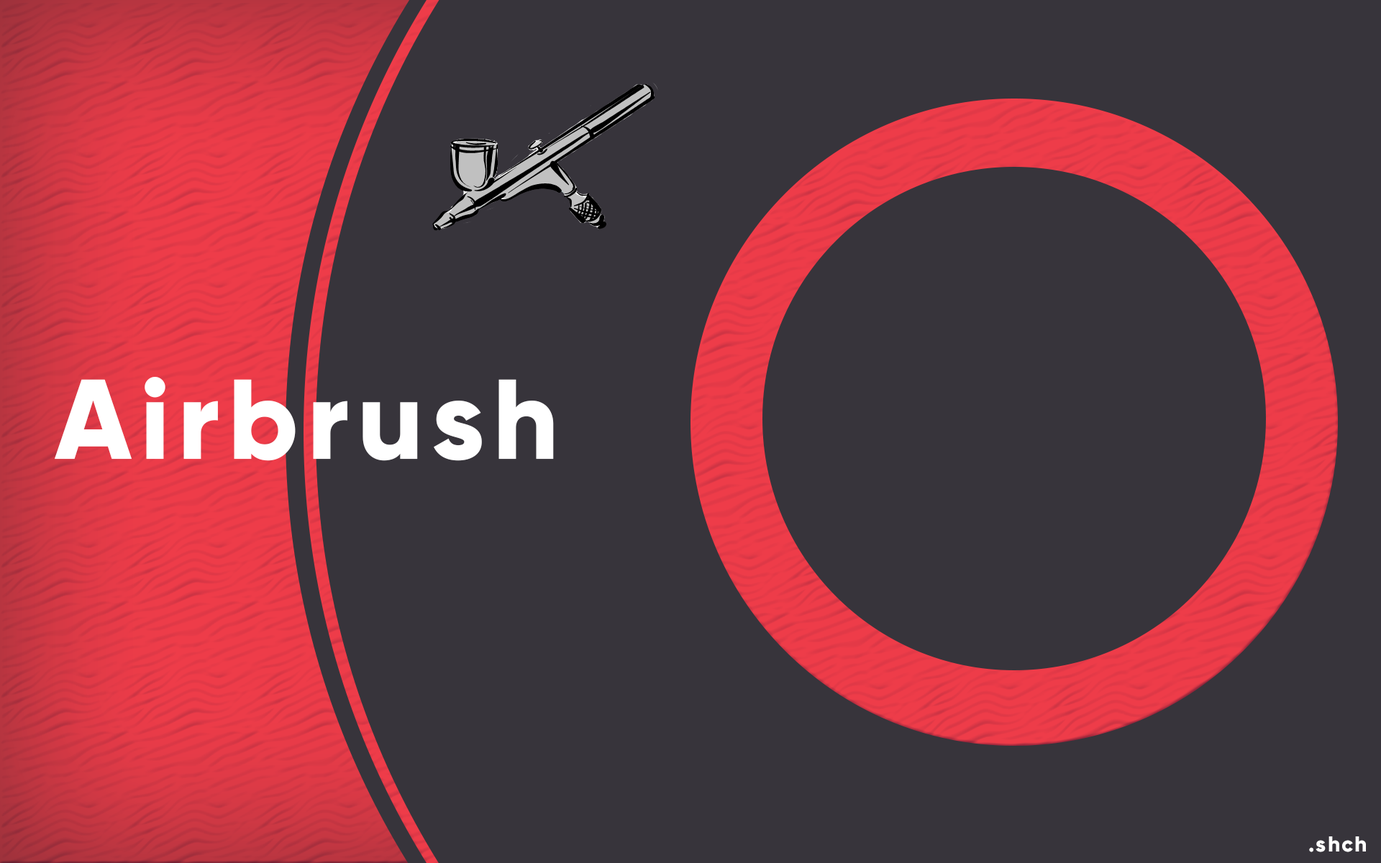
<style>
.page{position:relative;width:1381px;height:863px;background:#37343b}
.page>*{position:absolute;margin:0}
.t1{font:113.2px "Gilroy-ExtraBold";letter-spacing:0.075em;color:#ffffff}
.t2{font:21.6px "Gilroy-ExtraBold";letter-spacing:0.075em;color:#ffffff}
</style>
<div class="page">
<p class="t1" style="left:55px;top:377px;width:499px;height:84px">Airbrush</p>
<p class="t2" style="left:1309px;top:837px;width:57px;height:15px">.shch</p>
</div>
